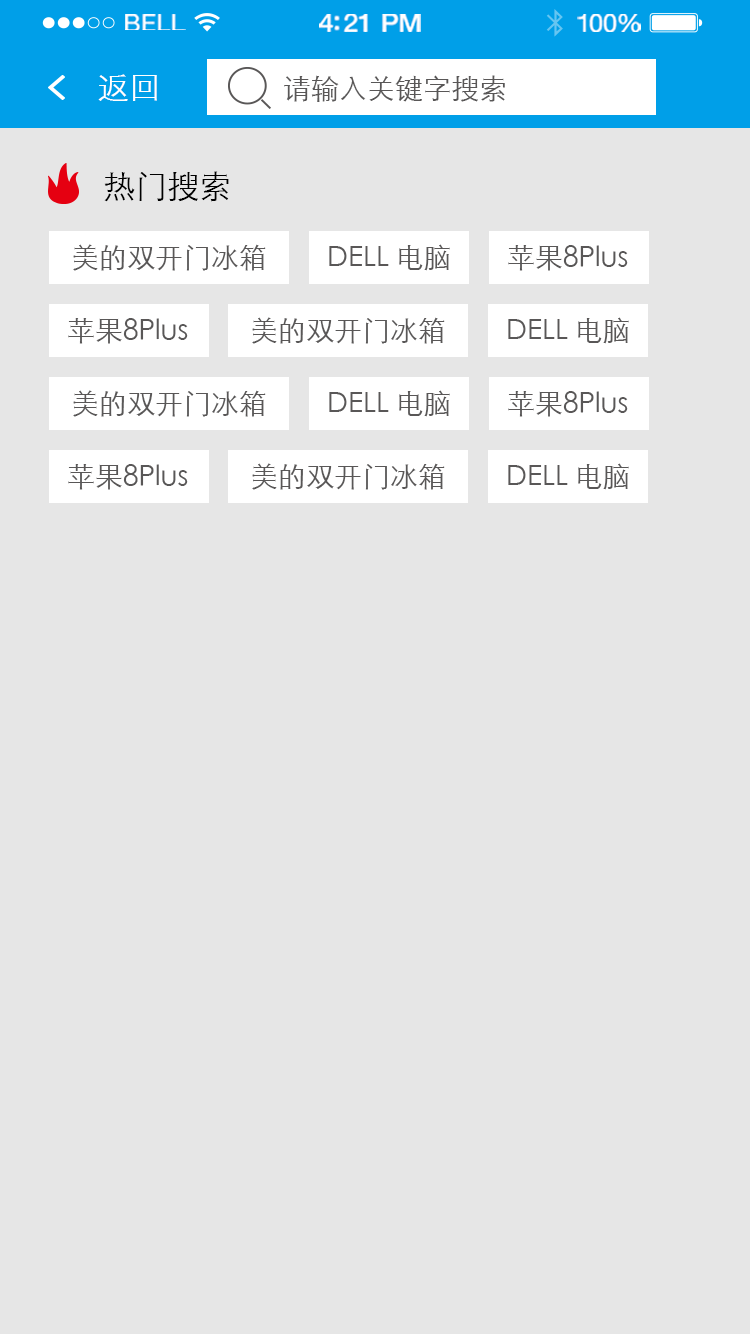
<style>
.page{position:relative;width:750px;height:1334px;background:#e6e6e6}
.page>*{position:absolute;margin:0}
.t1{font:23.3px "HelveticaNeue";letter-spacing:0.02em;color:#ffffff;scale:1.06 1}
.t2{font:25.3px "HelveticaNeue-Medium";letter-spacing:-0.02em;color:#ffffff;scale:1.06 1}
.t3{font:24.3px "HelveticaNeue";letter-spacing:-0.02em;color:#ffffff;scale:1.06 1}
.t4{font:32px "STXihei";color:#ffffff}
.t5{font:28px "STXihei";color:#595757}
.t6{font:32px "STXihei";color:#000000}
</style>
<div class="page">
<p class="t1" style="left:125px;top:14px;width:61px;height:16px">BELL</p>
<p class="t2" style="left:319px;top:14px;width:102px;height:18px">4:21 PM</p>
<p class="t3" style="left:577px;top:14px;width:64px;height:18px">100%</p>
<p class="t4" style="left:98px;top:74px;width:59px;height:27px">返回</p>
<p class="t5" style="left:284px;top:75px;width:221px;height:27px">请输入关键字搜索</p>
<p class="t6" style="left:104px;top:171px;width:125px;height:31px">热门搜索</p>
<p class="t5" style="left:73px;top:244px;width:193px;height:27px">美的双开门冰箱</p>
<p class="t5" style="left:329px;top:244px;width:121px;height:27px">DELL 电脑</p>
<p class="t5" style="left:508px;top:245px;width:120px;height:26px">苹果8Plus</p>
<p class="t5" style="left:68px;top:318px;width:120px;height:26px">苹果8Plus</p>
<p class="t5" style="left:252px;top:317px;width:193px;height:27px">美的双开门冰箱</p>
<p class="t5" style="left:508px;top:317px;width:121px;height:27px">DELL 电脑</p>
<p class="t5" style="left:73px;top:390px;width:193px;height:27px">美的双开门冰箱</p>
<p class="t5" style="left:329px;top:390px;width:121px;height:27px">DELL 电脑</p>
<p class="t5" style="left:508px;top:391px;width:120px;height:26px">苹果8Plus</p>
<p class="t5" style="left:68px;top:464px;width:120px;height:26px">苹果8Plus</p>
<p class="t5" style="left:252px;top:463px;width:193px;height:27px">美的双开门冰箱</p>
<p class="t5" style="left:508px;top:463px;width:121px;height:27px">DELL 电脑</p>
</div>
